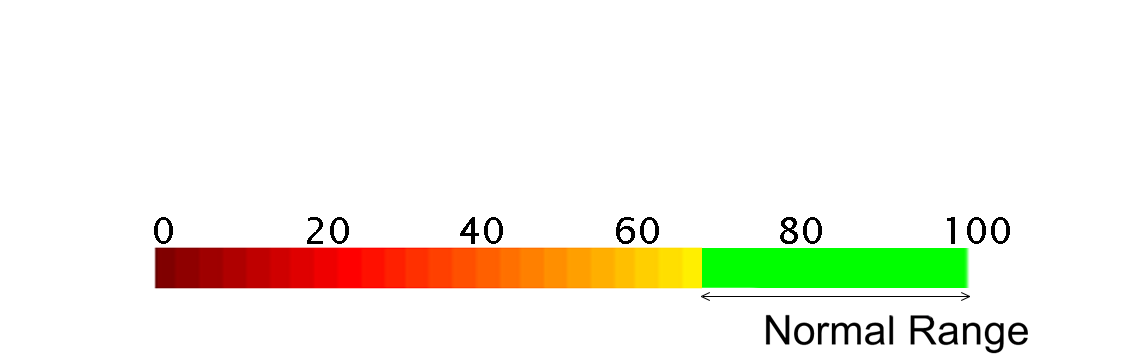
<style>
.page{position:relative;width:1126px;height:354px;background:#ffffff}
.page>*{position:absolute;margin:0}
.t1{font:37.5px "LucidaSans";color:#000000}
</style>
<div class="page">
<p class="t1" style="left:154px;top:217px;width:19px;height:27px">0</p>
<p class="t1" style="left:307px;top:217px;width:42px;height:27px">20</p>
<p class="t1" style="left:460px;top:217px;width:43px;height:27px">40</p>
<p class="t1" style="left:616px;top:217px;width:43px;height:27px">60</p>
<p class="t1" style="left:780px;top:217px;width:42px;height:27px">80</p>
<p class="t1" style="left:947px;top:217px;width:63px;height:27px">100</p>
</div>
